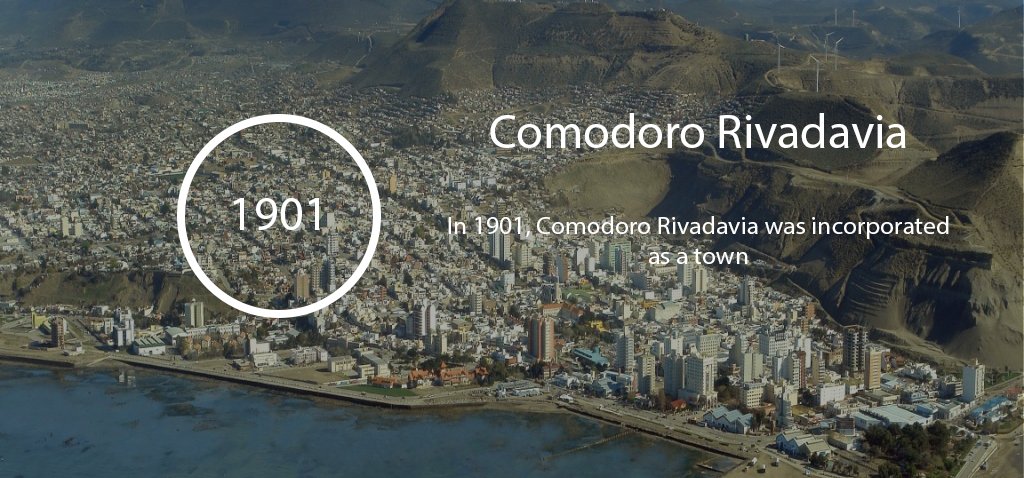
<style>
.page{position:relative;width:1024px;height:478px}
.page>*{position:absolute;margin:0}
.t1{font:48.4px "MyriadPro-Regular";color:#ffffff}
.t2{font:24.9px "MyriadPro-Regular";color:#ffffff;scale:1.03 1}
</style>
<div class="page">
<p class="t1" style="left:490px;top:113px;width:416px;height:35px">Comodoro Rivadavia</p>
<p class="t1" style="left:233px;top:198px;width:86px;height:32px">1901</p>
<p class="t2" style="left:448px;top:216px;width:501px;height:48px;text-align:center">In 1901, Comodoro Rivadavia was incorporated as a town</p>
</div>
